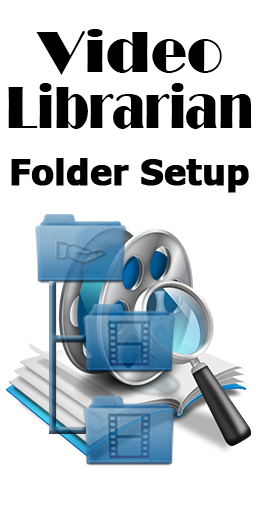
<style>
.page{position:relative;width:256px;height:506px;background:#ffffff}
.page>*{position:absolute;margin:0}
.t1{font:61.1px "Broadway";letter-spacing:-0.01em;color:#000000;scale:0.77 1}
.t2{font:60px "Broadway";color:#000000}
.t3{font:36px "Tahoma-Bold";color:#000000;font-weight:bold}
.t4{font:36px "Tahoma";color:#000000;font-weight:bold}
</style>
<div class="page">
<p class="t1" style="left:8px;top:29px;width:244px;height:100px;text-align:center"><span class="t2">Video<br></span>Librarian</p>
<p class="t3" style="left:11px;top:158px;width:238px;height:35px"><span class="t4"> </span>Folder Setup</p>
</div>
